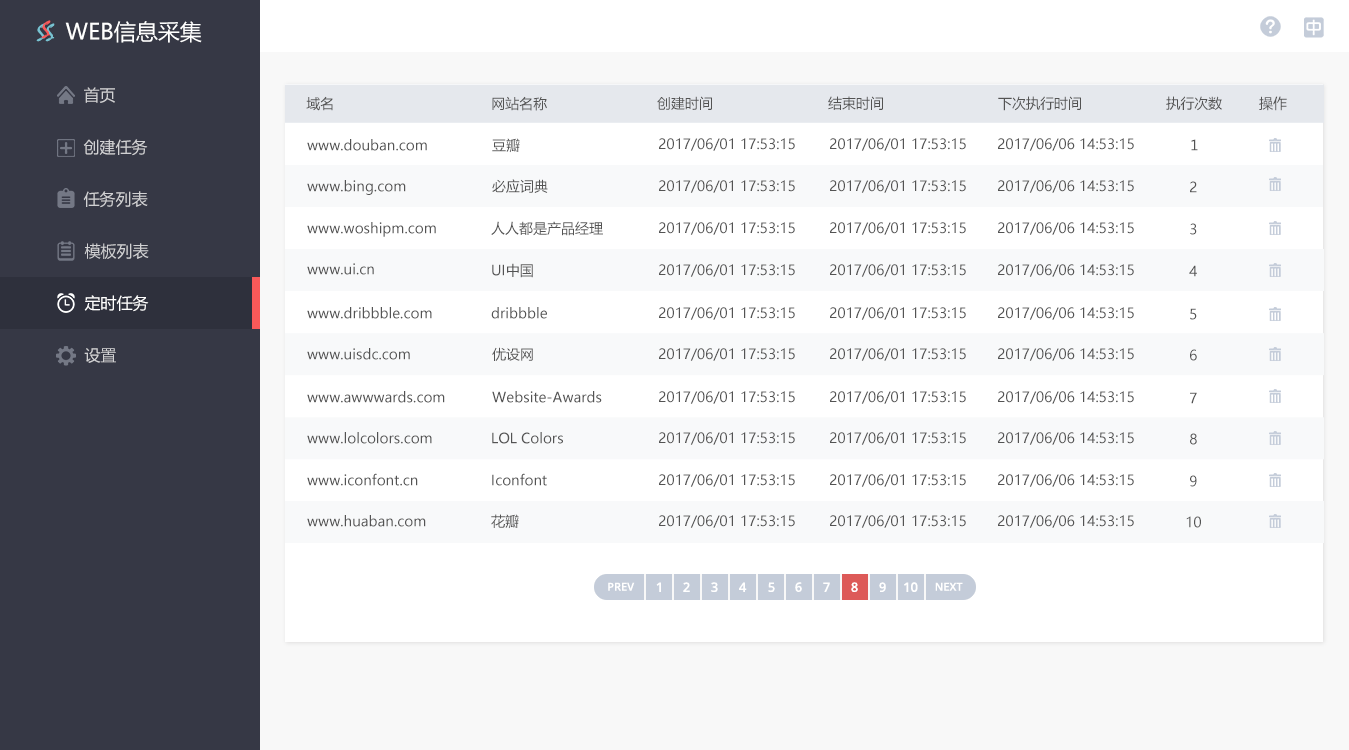
<style>
.page{position:relative;width:1349px;height:750px;background:#ffffff}
.page>*{position:absolute;margin:0}
.t1{font:24px "Mistral";color:#78c3d2}
.t2{font:24px "Mistral";color:#f95959}
.t3{font:22px "MicrosoftYaHei";color:#ffffff}
.t4{font:16px "MicrosoftYaHei";color:#d1d1d3}
.t5{font:14px "MicrosoftYaHei";color:#535353}
.t6{font:16px "MicrosoftYaHei";color:#ffffff}
</style>
<div class="page">
<p class="t1" style="left:36px;top:23px;width:10px;height:19px">S</p>
<p class="t2" style="left:41px;top:20px;width:10px;height:19px">S</p>
<p class="t1" style="left:45px;top:23px;width:10px;height:19px">S</p>
<p class="t3" style="left:65px;top:21px;width:137px;height:22px">WEB信息采集</p>
<p class="t4" style="left:84px;top:87px;width:31px;height:16px">首页</p>
<p class="t5" style="left:306px;top:96px;width:27px;height:15px">域名</p>
<p class="t5" style="left:492px;top:96px;width:55px;height:15px">网站名称</p>
<p class="t5" style="left:657px;top:96px;width:55px;height:14px">创建时间</p>
<p class="t5" style="left:828px;top:96px;width:55px;height:14px">结束时间</p>
<p class="t5" style="left:998px;top:96px;width:83px;height:15px">下次执行时间</p>
<p class="t5" style="left:1166px;top:96px;width:56px;height:15px">执行次数</p>
<p class="t5" style="left:1259px;top:96px;width:28px;height:15px">操作</p>
<p class="t4" style="left:83px;top:139px;width:65px;height:17px">创建任务</p>
<p class="t5" style="left:307px;top:139px;width:120px;height:12px">www.douban.com</p>
<p class="t5" style="left:492px;top:138px;width:28px;height:15px">豆瓣</p>
<p class="t5" style="left:659px;top:138px;width:136px;height:13px">2017/06/01 17:53:15</p>
<p class="t5" style="left:830px;top:138px;width:136px;height:13px">2017/06/01 17:53:15</p>
<p class="t5" style="left:998px;top:138px;width:136px;height:13px">2017/06/06 14:53:15</p>
<p class="t5" style="left:1191px;top:139px;width:7px;height:12px">1</p>
<p class="t5" style="left:307px;top:180px;width:99px;height:15px">www.bing.com</p>
<p class="t5" style="left:492px;top:179px;width:56px;height:14px">必应词典</p>
<p class="t5" style="left:659px;top:180px;width:136px;height:13px">2017/06/01 17:53:15</p>
<p class="t5" style="left:830px;top:180px;width:136px;height:13px">2017/06/01 17:53:15</p>
<p class="t5" style="left:998px;top:180px;width:136px;height:13px">2017/06/06 14:53:15</p>
<p class="t5" style="left:1190px;top:181px;width:7px;height:12px">2</p>
<p class="t4" style="left:83px;top:191px;width:65px;height:17px">任务列表</p>
<p class="t5" style="left:307px;top:222px;width:129px;height:15px">www.woshipm.com</p>
<p class="t5" style="left:491px;top:221px;width:112px;height:15px">人人都是产品经理</p>
<p class="t5" style="left:659px;top:222px;width:136px;height:13px">2017/06/01 17:53:15</p>
<p class="t5" style="left:830px;top:222px;width:136px;height:13px">2017/06/01 17:53:15</p>
<p class="t5" style="left:998px;top:222px;width:136px;height:13px">2017/06/06 14:53:15</p>
<p class="t5" style="left:1190px;top:223px;width:7px;height:12px">3</p>
<p class="t4" style="left:84px;top:243px;width:65px;height:16px">模板列表</p>
<p class="t5" style="left:307px;top:263px;width:67px;height:12px">www.ui.cn</p>
<p class="t5" style="left:492px;top:263px;width:41px;height:15px">UI中国</p>
<p class="t5" style="left:659px;top:264px;width:136px;height:13px">2017/06/01 17:53:15</p>
<p class="t5" style="left:830px;top:264px;width:136px;height:13px">2017/06/01 17:53:15</p>
<p class="t5" style="left:998px;top:264px;width:136px;height:13px">2017/06/06 14:53:15</p>
<p class="t5" style="left:1189px;top:265px;width:8px;height:12px">4</p>
<p class="t6" style="left:84px;top:295px;width:65px;height:17px">定时任务</p>
<p class="t5" style="left:307px;top:307px;width:125px;height:12px">www.dribbble.com</p>
<p class="t5" style="left:491px;top:307px;width:56px;height:12px">dribbble</p>
<p class="t5" style="left:659px;top:307px;width:136px;height:13px">2017/06/01 17:53:15</p>
<p class="t5" style="left:830px;top:307px;width:136px;height:13px">2017/06/01 17:53:15</p>
<p class="t5" style="left:998px;top:307px;width:136px;height:13px">2017/06/06 14:53:15</p>
<p class="t5" style="left:1190px;top:308px;width:7px;height:12px">5</p>
<p class="t4" style="left:84px;top:348px;width:32px;height:15px">设置</p>
<p class="t5" style="left:307px;top:348px;width:103px;height:12px">www.uisdc.com</p>
<p class="t5" style="left:492px;top:347px;width:41px;height:14px">优设网</p>
<p class="t5" style="left:659px;top:348px;width:136px;height:13px">2017/06/01 17:53:15</p>
<p class="t5" style="left:830px;top:348px;width:136px;height:13px">2017/06/01 17:53:15</p>
<p class="t5" style="left:998px;top:348px;width:136px;height:13px">2017/06/06 14:53:15</p>
<p class="t5" style="left:1190px;top:349px;width:7px;height:12px">6</p>
<p class="t5" style="left:307px;top:391px;width:138px;height:12px">www.awwwards.com</p>
<p class="t5" style="left:492px;top:391px;width:110px;height:12px">Website-Awards</p>
<p class="t5" style="left:659px;top:391px;width:136px;height:13px">2017/06/01 17:53:15</p>
<p class="t5" style="left:830px;top:391px;width:136px;height:13px">2017/06/01 17:53:15</p>
<p class="t5" style="left:998px;top:391px;width:136px;height:13px">2017/06/06 14:53:15</p>
<p class="t5" style="left:1190px;top:392px;width:7px;height:12px">7</p>
<p class="t5" style="left:307px;top:432px;width:125px;height:12px">www.lolcolors.com</p>
<p class="t5" style="left:492px;top:432px;width:71px;height:12px">LOL Colors</p>
<p class="t5" style="left:659px;top:432px;width:136px;height:13px">2017/06/01 17:53:15</p>
<p class="t5" style="left:830px;top:432px;width:136px;height:13px">2017/06/01 17:53:15</p>
<p class="t5" style="left:998px;top:432px;width:136px;height:13px">2017/06/06 14:53:15</p>
<p class="t5" style="left:1190px;top:433px;width:7px;height:12px">8</p>
<p class="t5" style="left:307px;top:473px;width:111px;height:13px">www.iconfont.cn</p>
<p class="t5" style="left:492px;top:473px;width:55px;height:13px">Iconfont</p>
<p class="t5" style="left:659px;top:474px;width:136px;height:13px">2017/06/01 17:53:15</p>
<p class="t5" style="left:830px;top:474px;width:136px;height:13px">2017/06/01 17:53:15</p>
<p class="t5" style="left:998px;top:474px;width:136px;height:13px">2017/06/06 14:53:15</p>
<p class="t5" style="left:1190px;top:475px;width:7px;height:12px">9</p>
<p class="t5" style="left:307px;top:515px;width:119px;height:12px">www.huaban.com</p>
<p class="t5" style="left:491px;top:514px;width:28px;height:15px">花瓣</p>
<p class="t5" style="left:659px;top:515px;width:136px;height:13px">2017/06/01 17:53:15</p>
<p class="t5" style="left:830px;top:515px;width:136px;height:13px">2017/06/01 17:53:15</p>
<p class="t5" style="left:998px;top:515px;width:136px;height:13px">2017/06/06 14:53:15</p>
<p class="t5" style="left:1186px;top:516px;width:15px;height:12px">10</p>
</div>
